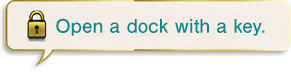
<style>
.page{position:relative;width:291px;height:72px}
.page>*{position:absolute;margin:0}
.t1{font:19px "FutoGoB101Pr5-Bold";color:#008c91}
</style>
<div class="page">
<p class="t1" style="left:56px;top:18px;width:209px;height:18px">Open a dock with a key.</p>
</div>
